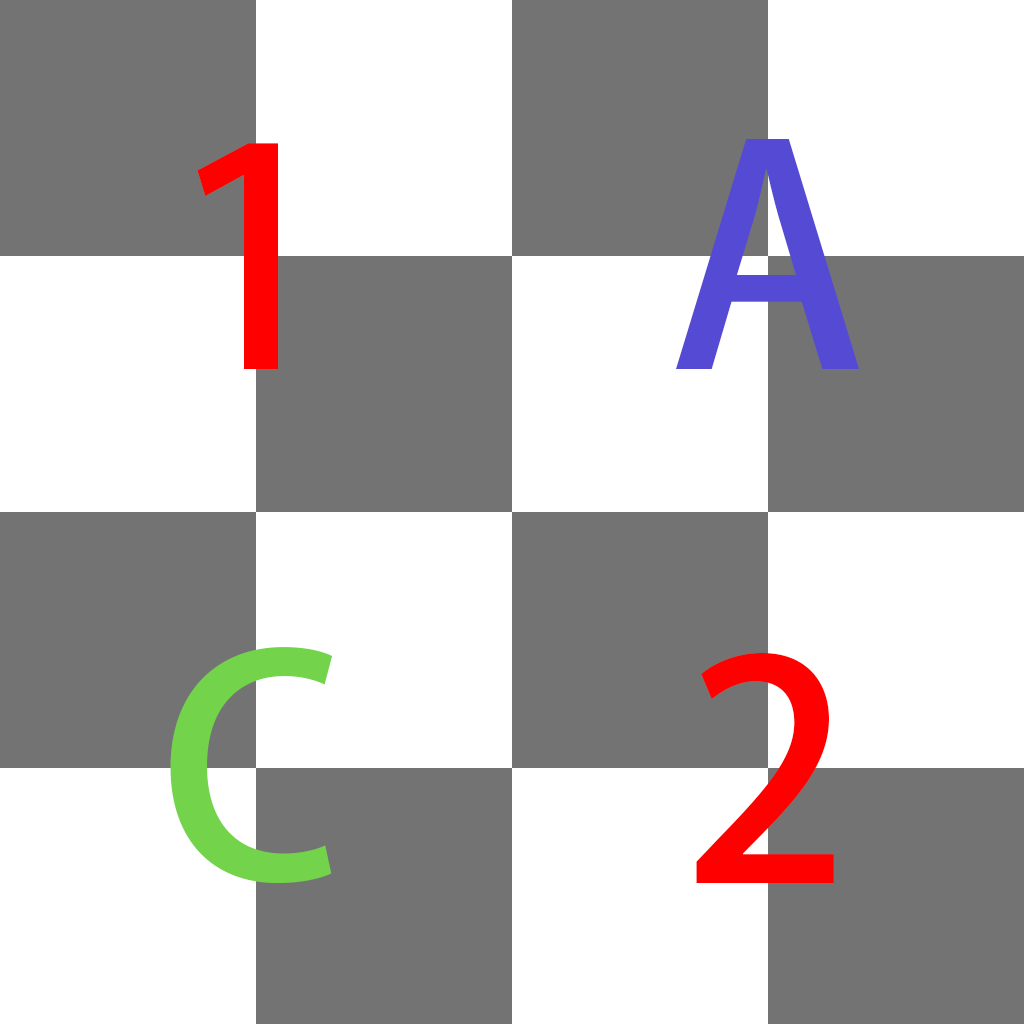
<style>
.page{position:relative;width:1024px;height:1024px;background:#737373}
.page>*{position:absolute;margin:0}
.t1{font:300px "AdobeHeitiStd-Regular";color:#ff0000}
.t2{font:300px "AdobeHeitiStd-Regular";color:#554ad3}
.t3{font:300px "AdobeHeitiStd-Regular";color:#73d34a}
</style>
<div class="page">
<p class="t1" style="left:197px;top:143px;width:81px;height:226px">1</p>
<p class="t2" style="left:676px;top:139px;width:183px;height:230px">A</p>
<p class="t3" style="left:170px;top:647px;width:163px;height:237px">C</p>
<p class="t1" style="left:696px;top:653px;width:138px;height:230px">2</p>
</div>
